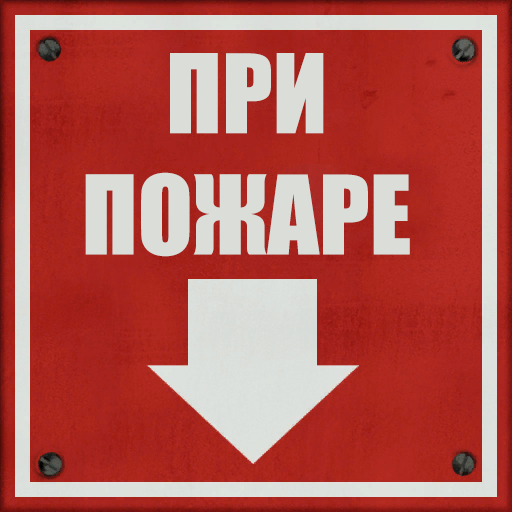
<style>
.page{position:relative;width:512px;height:512px}
.page>*{position:absolute;margin:0}
.t1{font:101px "Impact";color:#dbddd8}
</style>
<div class="page">
<p class="t1" style="left:85px;top:53px;width:325px;height:204px;text-align:center">ПРИ<br>ПОЖАРЕ</p>
</div>
